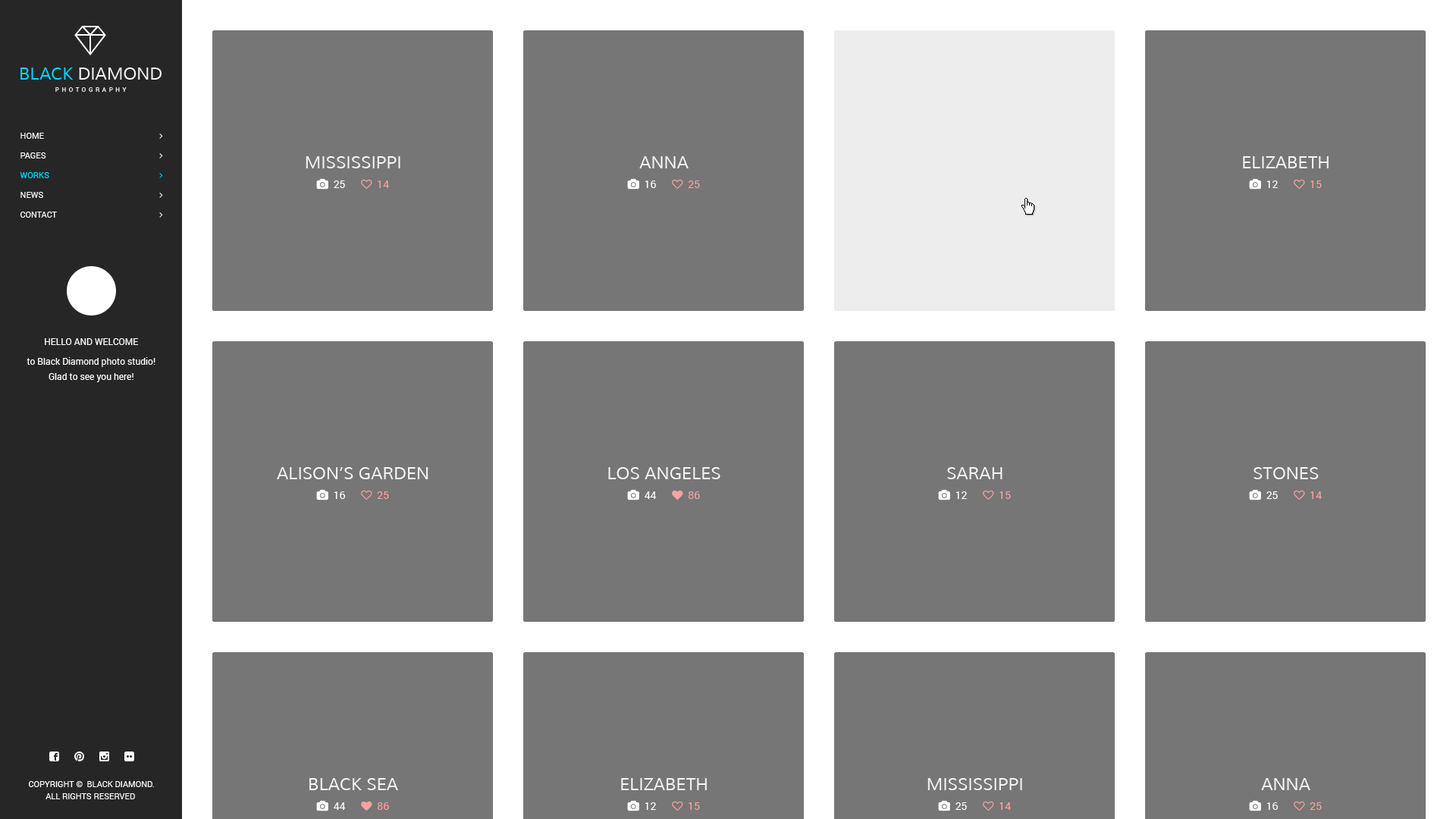
<style>
.page{position:relative;width:1456px;height:819px;background:#767676}
.page>*{position:absolute;margin:0}
.t1{font:8.3px/19.7px "Roboto-Regular";color:#ffffff;text-transform:uppercase}
.t2{font:8.3px/19.7px "Roboto-Regular";color:#00d8ff;text-transform:uppercase}
.t3{font:16.7px "Muli";color:#f6f6f6;text-transform:uppercase}
.t4{font:9.1px/15.2px "Roboto-Regular";color:#ffffff}
.t5{font:9.1px/15.2px "Roboto-Regular";color:#ffffff;text-transform:uppercase}
.t6{font:9.1px/19.7px "Roboto-Regular";color:#ffffff}
.t7{font:8.3px/12.1px "Roboto-Regular";color:#ffffff;text-transform:uppercase}
</style>
<div class="page">
<p class="t1" style="left:20px;top:133px;width:37px;height:85px">home<br>Pages<br><span class="t2">Works<br></span>News<br>Contact</p>
<p class="t3" style="left:306px;top:156px;width:94px;height:12px">Mississippi</p>
<p class="t3" style="left:639px;top:156px;width:50px;height:12px">Anna</p>
<p class="t3" style="left:1243px;top:156px;width:86px;height:12px">Elizabeth</p>
<p class="t4" style="left:27px;top:338px;width:128px;height:44px;text-align:center"><span class="t5">Hello And Welcome<br></span><span class="t6">t</span>o Black Diamond photo studio!<br>Glad to see you here!</p>
<p class="t3" style="left:277px;top:467px;width:151px;height:12px">Alison’s Garden</p>
<p class="t3" style="left:608px;top:467px;width:112px;height:12px">Los Angeles</p>
<p class="t3" style="left:947px;top:467px;width:56px;height:12px">Sarah</p>
<p class="t3" style="left:1254px;top:467px;width:65px;height:12px">Stones</p>
<p class="t7" style="left:29px;top:781px;width:125px;height:18px;text-align:center">Copyright ©  Black Diamond.<br>All Rights Reserved</p>
<p class="t3" style="left:309px;top:778px;width:89px;height:12px">Black Sea</p>
<p class="t3" style="left:621px;top:778px;width:86px;height:12px">Elizabeth</p>
<p class="t3" style="left:927px;top:778px;width:95px;height:12px">Mississippi</p>
<p class="t3" style="left:1261px;top:778px;width:49px;height:12px">Anna</p>
</div>
